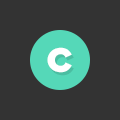
<style>
.page{position:relative;width:120px;height:120px;background:#333333}
.page>*{position:absolute;margin:0}
.t1{font:36px "ProximaNova-Black";color:#ffffff}
</style>
<div class="page">
<p class="t1" style="left:47px;top:47px;width:25px;height:26px">C</p>
</div>
